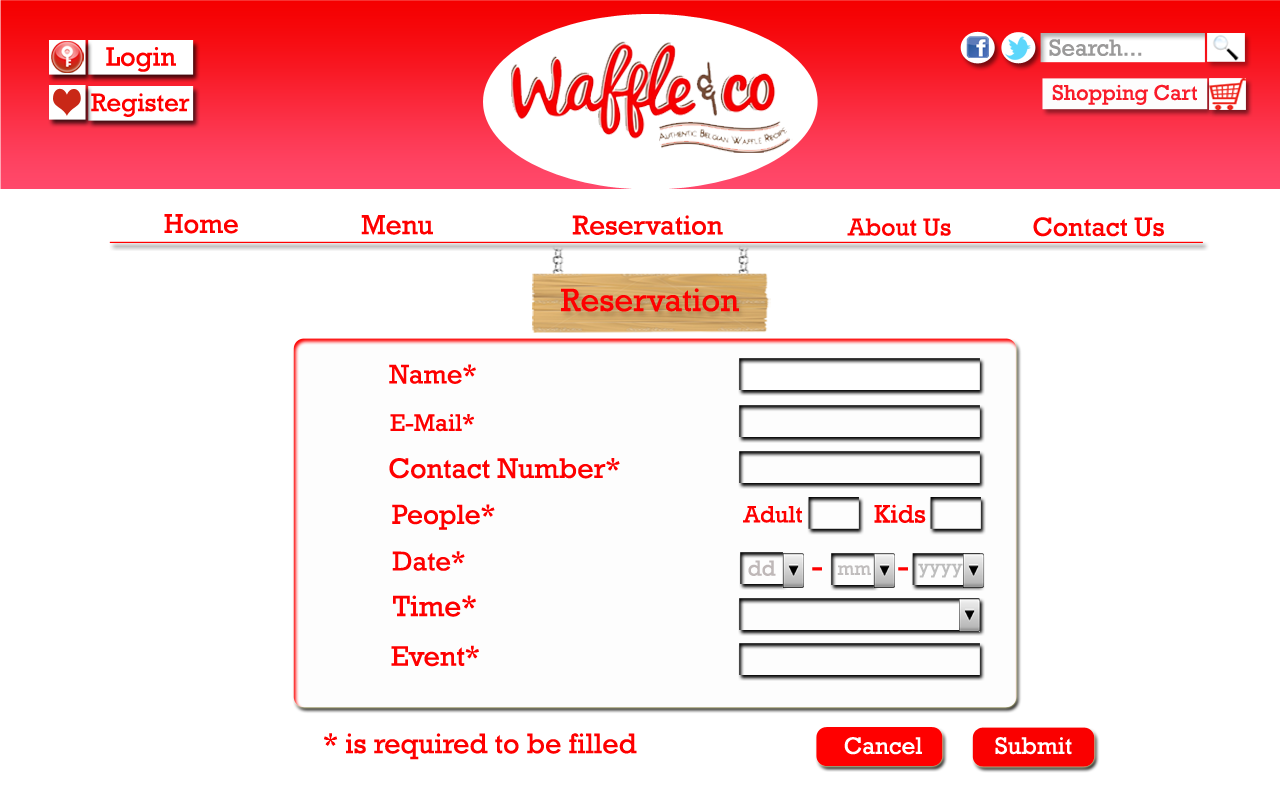
<style>
.page{position:relative;width:1280px;height:800px;background:#ffffff}
.page>*{position:absolute;margin:0}
.t1{font:27.5px "Rockwell";color:#fe0000}
.t2{font:28px "Rockwell";color:#fe0000}
.t3{font:27.6px "Rockwell";color:#fe0000}
.t4{font:24.9px "Rockwell";color:#fe0000}
.t5{font:26.7px "Rockwell";color:#fe0000}
.t6{font:32.8px "Rockwell";color:#fe0000}
.t7{font:27.2px "Rockwell";color:#fe0000}
.t8{font:24.3px "Rockwell";color:#fe0000}
.t9{font:28.6px "Rockwell";color:#fe0000}
.t10{font:27.9px "Rockwell";color:#fe0000}
.t11{font:23.9px "Rockwell";color:#fe0000}
.t12{font:25.9px "Rockwell";color:#fe0000}
.t13{font:27.4px "Rockwell";color:#fe0000}
.t14{font:22.3px "Rockwell";color:#bfb8b8}
.t15{font:32.1px "Rockwell";color:#fe0000}
.t16{font:19.4px "Rockwell";color:#c0bdbd}
.t17{font:19.7px "Rockwell";color:#bdbdbd}
.t18{font:29.7px "Rockwell";color:#fe0000}
.t19{font:24.2px "Rockwell";color:#ffffff}
</style>
<div class="page">
<p class="t1" style="left:164px;top:214px;width:74px;height:20px">Home</p>
<p class="t2" style="left:361px;top:215px;width:72px;height:20px">Menu</p>
<p class="t3" style="left:572px;top:215px;width:151px;height:20px">Reservation</p>
<p class="t4" style="left:847px;top:218px;width:104px;height:18px">About Us</p>
<p class="t5" style="left:1033px;top:217px;width:131px;height:20px">Contact Us</p>
<p class="t6" style="left:561px;top:288px;width:178px;height:24px">Reservation</p>
<p class="t7" style="left:389px;top:364px;width:87px;height:20px">Name*</p>
<p class="t8" style="left:390px;top:414px;width:84px;height:18px">E-Mail*</p>
<p class="t9" style="left:389px;top:458px;width:231px;height:21px">Contact Number*</p>
<p class="t10" style="left:392px;top:504px;width:103px;height:26px">People*</p>
<p class="t11" style="left:743px;top:506px;width:59px;height:17px">Adult</p>
<p class="t12" style="left:874px;top:504px;width:52px;height:19px">Kids</p>
<p class="t13" style="left:392px;top:551px;width:73px;height:20px">Date*</p>
<p class="t14" style="left:748px;top:560px;width:28px;height:16px">dd</p>
<p class="t15" style="left:812px;top:567px;width:10px;height:4px">-</p>
<p class="t16" style="left:837px;top:565px;width:34px;height:10px">mm</p>
<p class="t15" style="left:898px;top:567px;width:10px;height:4px">-</p>
<p class="t17" style="left:918px;top:563px;width:45px;height:15px">yyyy</p>
<p class="t18" style="left:393px;top:595px;width:83px;height:22px">Time*</p>
<p class="t9" style="left:391px;top:645px;width:88px;height:22px">Event*</p>
<p class="t9" style="left:324px;top:733px;width:313px;height:27px">* is required to be filled</p>
<p class="t19" style="left:844px;top:737px;width:78px;height:18px">Cancel</p>
<p class="t19" style="left:995px;top:737px;width:77px;height:18px">Submit</p>
</div>
